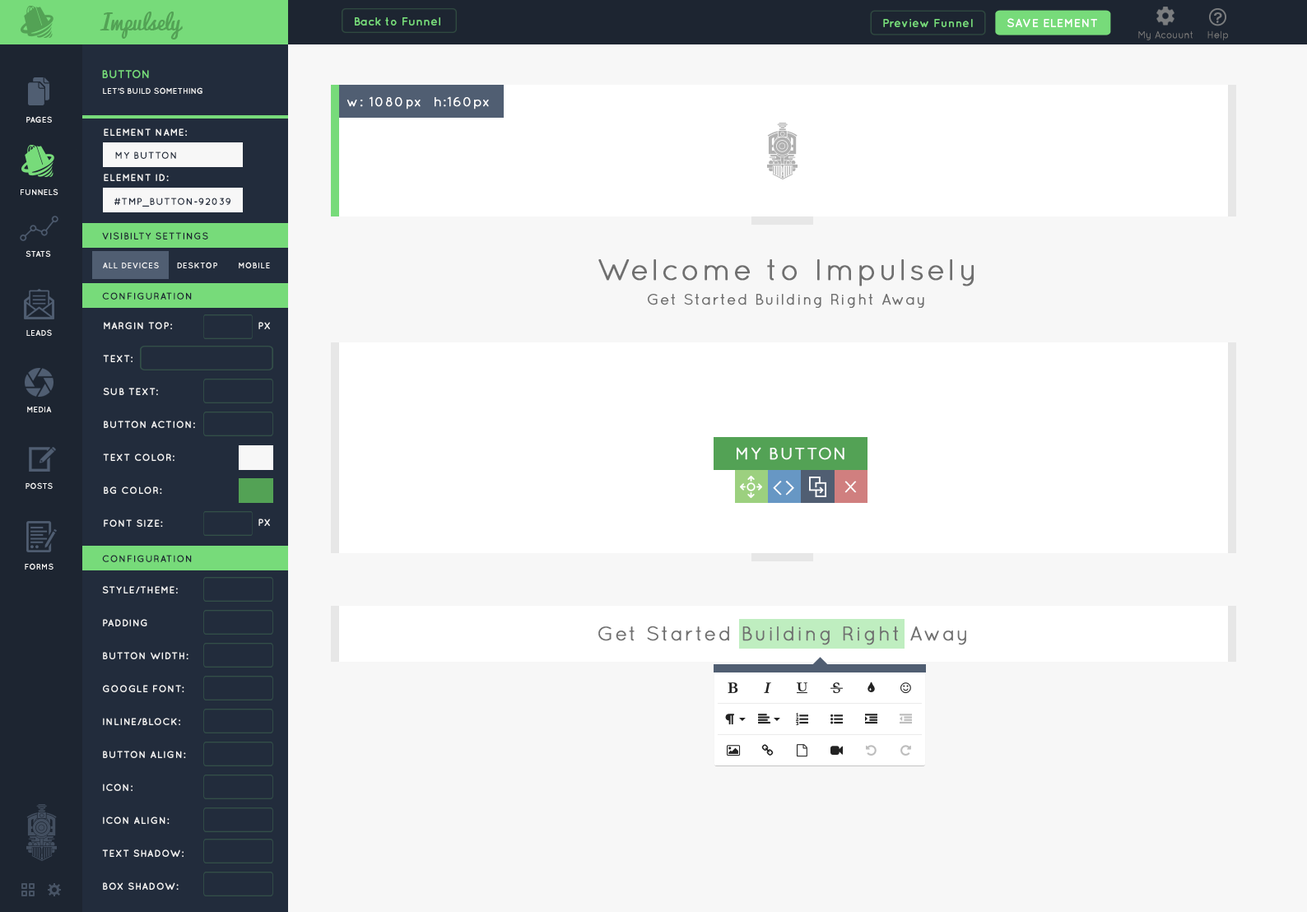
<style>
.page{position:relative;width:1307px;height:912px;background:#f7f7f7}
.page>*{position:absolute;margin:0}
.t1{font:21.6px "Pacifico";color:#53a255}
.t2{font:12px "Quicksand-Bold";color:#77db7a}
.t3{font:12px "Quicksand-Bold";color:#ffffff}
.t4{font:9.9px "Quicksand-Regular";color:#797979}
.t5{font:11.5px "Quicksand-Bold";color:#77db7a;text-transform:uppercase}
.t6{font:8.2px "Quicksand-Bold";color:#f7f7f7;text-transform:uppercase}
.t7{font:13px "Quicksand-Regular";letter-spacing:0.07em;color:#ffffff;font-weight:bold}
.t8{font:9.9px "Quicksand-Bold";letter-spacing:0.05em;color:#222c3c;text-transform:uppercase}
.t9{font:9.9px "Quicksand-Bold";letter-spacing:0.05em;color:#1d2531;text-transform:uppercase}
.t10{font:8.2px "Quicksand-Bold";letter-spacing:0.05em;color:#f7f7f7;text-transform:uppercase}
.t11{font:29.6px "Quicksand-Regular";letter-spacing:0.07em;color:#6f6f6f;font-weight:bold}
.t12{font:14.8px "Quicksand-Regular";letter-spacing:0.07em;color:#6f6f6f;font-weight:bold}
.t13{font:9.9px/32.9px "Quicksand-Bold";letter-spacing:0.05em;color:#f7f7f7;text-transform:uppercase}
.t14{font:9.9px "Quicksand-Bold";letter-spacing:0.05em;color:#f7f7f7;text-transform:uppercase}
.t15{font:16.5px "Quicksand-Regular";letter-spacing:0.07em;color:#ffffff;font-weight:bold}
.t16{font:18.5px "EuphemiaUCAS";letter-spacing:0.12em;color:#ffffff;text-transform:uppercase;scale:1.12 1}
.t17{font:15.6px "Quicksand-Regular";letter-spacing:0.07em;color:#ffffff;font-weight:bold;scale:1.27 1}
.t18{font:19.8px "Quicksand-Regular";letter-spacing:0.07em;color:#6f6f6f;font-weight:bold}
</style>
<div class="page">
<p class="t1" style="left:100px;top:12px;width:83px;height:28px">Impulsely</p>
<p class="t2" style="left:355px;top:17px;width:85px;height:9px">Back to Funnel</p>
<p class="t2" style="left:883px;top:19px;width:90px;height:8px">Preview Funnel</p>
<p class="t3" style="left:1008px;top:18px;width:89px;height:9px">SAVE ELEMENT</p>
<p class="t4" style="left:1139px;top:30px;width:54px;height:10px">My Acouunt</p>
<p class="t4" style="left:1208px;top:30px;width:20px;height:10px">Help</p>
<p class="t5" style="left:102px;top:70px;width:47px;height:8px">BUTTON</p>
<p class="t6" style="left:103px;top:87px;width:100px;height:7px">Let’s build something</p>
<p class="t7" style="left:347px;top:96px;width:142px;height:13px">w: 1080px  h:160px</p>
<p class="t6" style="left:26px;top:116px;width:26px;height:7px">PAGES</p>
<p class="t8" style="left:115px;top:151px;width:61px;height:8px">MY BUTTON</p>
<p class="t6" style="left:21px;top:189px;width:37px;height:6px">FUNNELS</p>
<p class="t8" style="left:114px;top:198px;width:117px;height:9px">#tmp_button-92039</p>
<p class="t9" style="left:102px;top:232px;width:106px;height:8px">VISIBILTY SETTINGS</p>
<p class="t6" style="left:26px;top:250px;width:25px;height:7px">STATS</p>
<p class="t10" style="left:103px;top:262px;width:167px;height:6px">ALL DEVICES      DESKTOP       MOBILE</p>
<p class="t11" style="left:598px;top:259px;width:376px;height:27px">Welcome to Impulsely</p>
<p class="t9" style="left:102px;top:292px;width:90px;height:8px">CONFIGURATION</p>
<p class="t12" style="left:648px;top:294px;width:276px;height:14px">Get Started Building Right Away</p>
<p class="t6" style="left:26px;top:329px;width:26px;height:7px">LEADS</p>
<p class="t13" style="left:103px;top:322px;width:92px;height:205px">margin top:<br>text:<br>sub text:<br>button action:<br>text color:<br>bg color:<br>font size:</p>
<p class="t14" style="left:258px;top:322px;width:12px;height:7px">PX</p>
<p class="t6" style="left:27px;top:407px;width:25px;height:5px">MEDIA</p>
<p class="t15" style="left:737px;top:447px;width:108px;height:13px">MY BUTTON</p>
<p class="t6" style="left:26px;top:482px;width:27px;height:7px">POSTS</p>
<p class="t16" style="left:773px;top:481px;width:21px;height:15px">&lt;&gt;</p>
<p class="t17" style="left:845px;top:481px;width:12px;height:12px">X</p>
<p class="t14" style="left:258px;top:519px;width:12px;height:7px">PX</p>
<p class="t9" style="left:102px;top:555px;width:90px;height:7px">CONFIGURATION</p>
<p class="t6" style="left:25px;top:563px;width:29px;height:7px">FORMS</p>
<p class="t13" style="left:102px;top:586px;width:87px;height:304px">style/theme:<br>padding<br>button width:<br>google font:<br>inline/block:<br>button align:<br>icon:<br>icon align:<br>text shadow:<br>box shadow:</p>
<p class="t18" style="left:598px;top:626px;width:368px;height:19px">Get Started Building Right Away</p>
</div>
